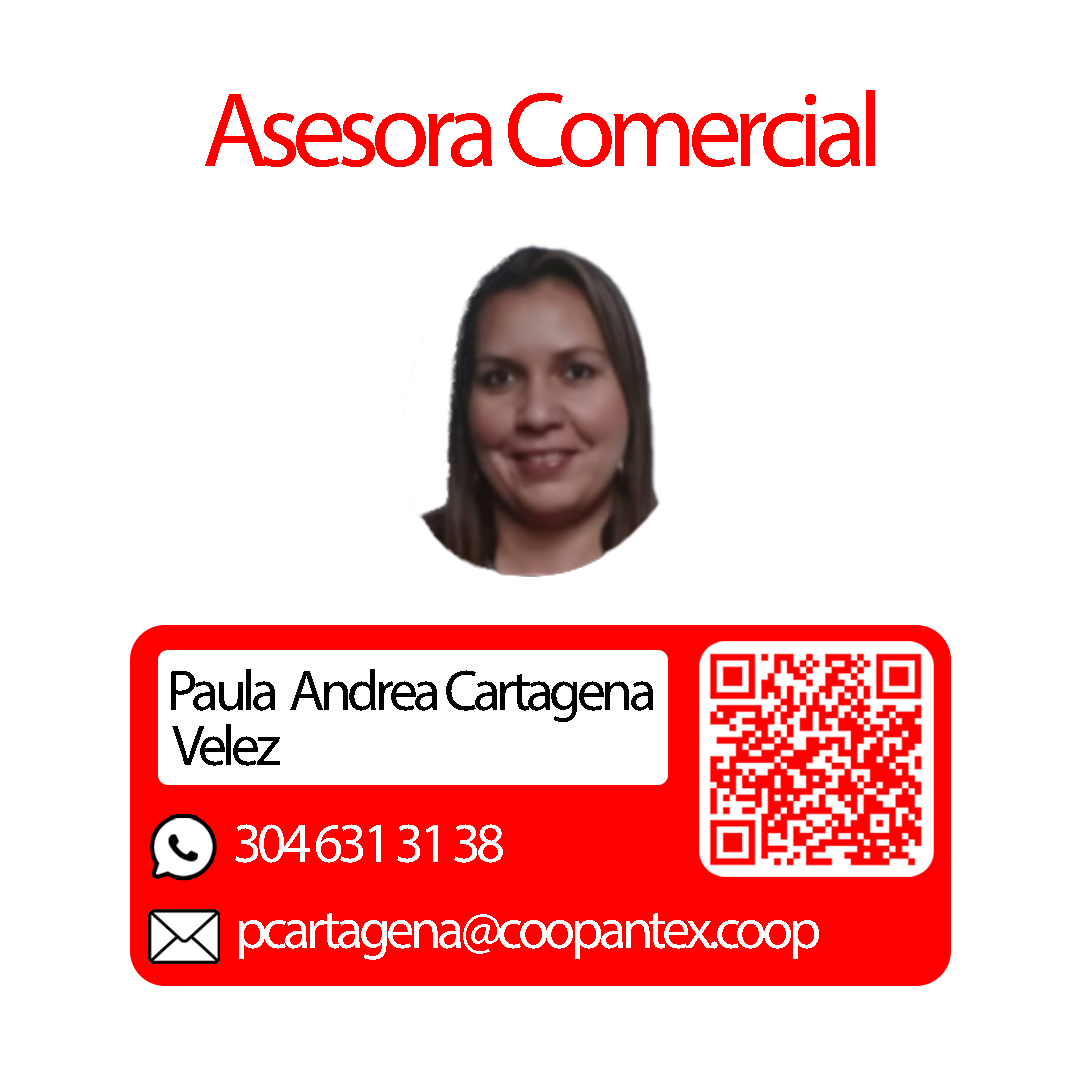
<style>
.page{position:relative;width:1080px;height:1080px;background:#ffffff}
.page>*{position:absolute;margin:0}
.t1{font:107.2px "MyriadConceptRoman-Regular";letter-spacing:-0.08em;color:#ff0000}
.t2{font:57.8px/54.9px "MyriadConceptRoman-Regular";letter-spacing:-0.08em;color:#000000}
.t3{font:56.8px "MyriadConceptRoman-Regular";letter-spacing:-0.08em;color:#ffffff}
.t4{font:56.8px "MyriadPro-Regular";letter-spacing:-0.08em;color:#ffffff}
</style>
<div class="page">
<p class="t1" style="left:205px;top:90px;width:670px;height:77px">Asesora Comercial</p>
<p class="t2" style="left:171px;top:669px;width:482px;height:97px">Paula  Andrea Cartagena<br> Velez</p>
<p class="t3" style="left:235px;top:824px;width:268px;height:39px">304 631 31 38</p>
<p class="t3" style="left:239px;top:913px;width:580px;height:47px">pcartagena<span class="t4">@</span>coopantex.coop</p>
</div>
